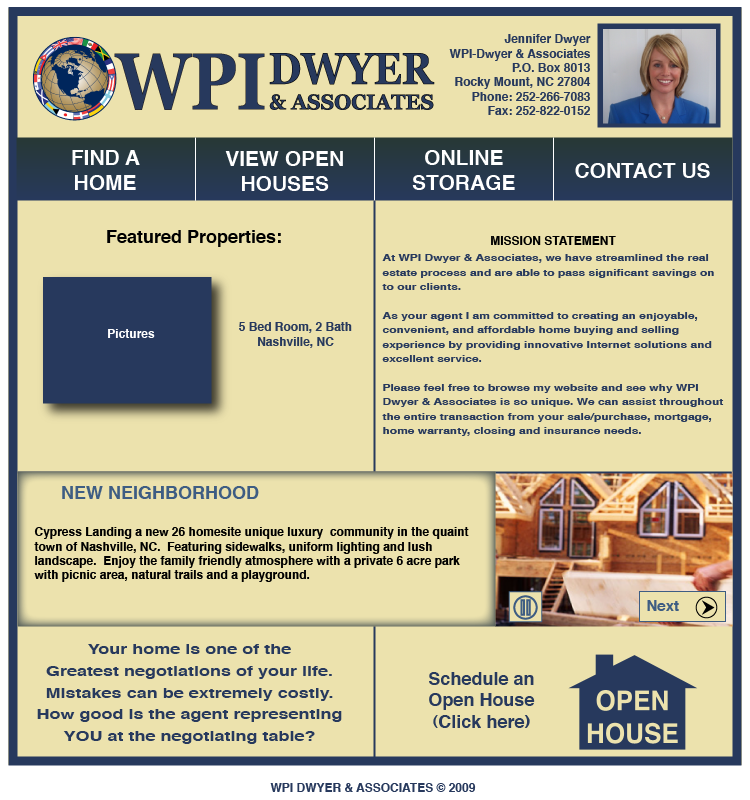
<style>
.page{position:relative;width:750px;height:800px;background:#ece2ad}
.page>*{position:absolute;margin:0}
.t1{font:12px "Helvetica-Bold";color:#27395d}
.t2{font:21px "Helvetica-Bold";color:#ffffff}
.t3{font:18px "Helvetica-Bold";color:#000000}
.t4{font:12px "Helvetica-Bold";color:#000000}
.t5{font:9px "Helvetica-Bold";color:#27395d;scale:1.33 1}
.t6{font:12px "Helvetica-Bold";color:#ffffff}
.t7{font:18px "Helvetica-Bold";color:#3e5d83}
.t8{font:15px "Helvetica-Bold";color:#3e5d83}
.t9{font:13.5px "Helvetica-Bold";color:#27395d;scale:1.33 1}
.t10{font:18px "Helvetica-Bold";color:#27395d}
</style>
<div class="page">
<p class="t1" style="left:449px;top:34px;width:142px;height:81px;text-align:right">Jennifer Dwyer<br>WPI-Dwyer &amp; Associates<br>P.O. Box 8013<br>Rocky Mount, NC 27804<br>Phone: 252-266-7083<br>Fax: 252-822-0152</p>
<p class="t2" style="left:72px;top:150px;width:68px;height:40px;text-align:center">FIND A <br>HOME</p>
<p class="t2" style="left:412px;top:150px;width:103px;height:40px;text-align:center">ONLINE <br>STORAGE</p>
<p class="t2" style="left:225px;top:151px;width:118px;height:40px;text-align:center">VIEW OPEN HOUSES</p>
<p class="t2" style="left:575px;top:163px;width:135px;height:15px">CONTACT US</p>
<p class="t3" style="left:107px;top:230px;width:174px;height:17px">Featured Properties:</p>
<p class="t4" style="left:491px;top:236px;width:125px;height:9px">MISSION STATEMENT</p>
<p class="t5" style="left:382px;top:254px;width:342px;height:182px">At WPI Dwyer &amp; Associates, we have streamlined the real estate process and are able to pass significant savings on to our clients.<br><br>As your agent I am committed to creating an enjoyable, convenient, and affordable home buying and selling experience by providing innovative Internet solutions and <br>excellent service.<br><br>Please feel free to browse my website and see why WPI Dwyer &amp; Associates is so unique. We can assist throughout the entire transaction from your sale/purchase, mortgage, home warranty, closing and insurance needs.</p>
<p class="t6" style="left:108px;top:329px;width:47px;height:9px">Pictures</p>
<p class="t1" style="left:239px;top:322px;width:113px;height:26px;text-align:center">5 Bed Room, 2 Bath<br>Nashville, NC</p>
<p class="t7" style="left:62px;top:486px;width:197px;height:13px">NEW NEIGHBORHOOD</p>
<p class="t4" style="left:34px;top:527px;width:435px;height:55px">Cypress Landing a new 26 homesite unique luxury  community in the quaint town of Nashville, NC.  Featuring sidewalks, uniform lighting and lush landscape.  Enjoy the family friendly atmosphere with a private 6 acre park with picnic area, natural trails and a playground.</p>
<p class="t8" style="left:647px;top:600px;width:32px;height:11px">Next</p>
<p class="t9" style="left:37px;top:644px;width:305px;height:100px;text-align:center">Your home is one of the <br>Greatest negotiations of your life. Mistakes can be extremely costly.<br>How good is the agent representing YOU at the negotiating table?</p>
<p class="t10" style="left:429px;top:672px;width:106px;height:56px;text-align:center">Schedule an <br>Open House<br>(Click here)</p>
<p class="t1" style="left:270px;top:783px;width:206px;height:9px">WPI DWYER &amp; ASSOCIATES © 2009</p>
</div>
